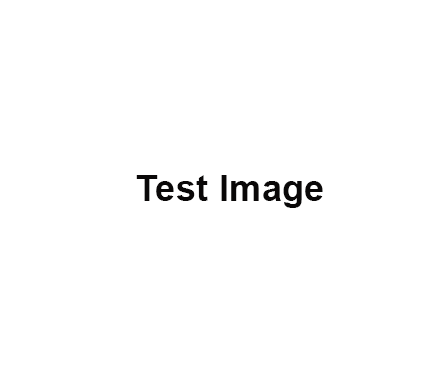
<style>
.page{position:relative;width:430px;height:390px;background:#ffffff}
.page>*{position:absolute;margin:0}
.t1{font:36px "Arial-BoldMT";letter-spacing:0.01em;color:#0a0808}
</style>
<div class="page">
<p class="t1" style="left:136px;top:175px;width:187px;height:33px">Test Image</p>
</div>
